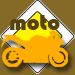
<style>
.page{position:relative;width:75px;height:75px;background:#856a27}
.page>*{position:absolute;margin:0}
.t1{font:22.9px "Bauhaus93";color:#594209}
</style>
<div class="page">
<p class="t1" style="left:10px;top:15px;width:50px;height:15px">moto</p>
</div>
